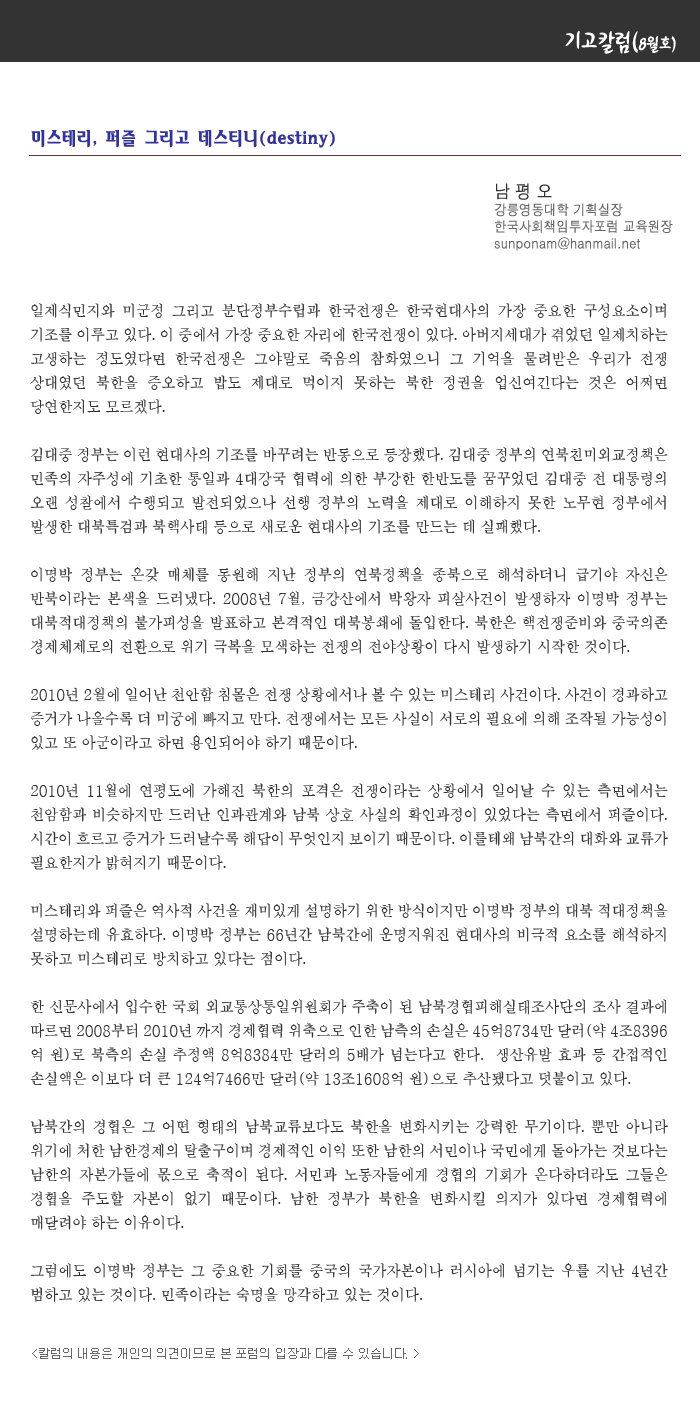
<style>
.page{position:relative;width:700px;height:1401px;background:#ffffff}
.page>*{position:absolute;margin:0}
.t1{font:24px "Seoul-Script";letter-spacing:-0.01em;color:#ffffff;scale:0.9 1}
.t2{font:18px "Seoul-Script";letter-spacing:-0.01em;color:#ffffff;scale:0.9 1}
.t3{font:18px "Seoul-Crysanthemum";letter-spacing:-0.01em;color:#333399;scale:0.9 1}
.t4{font:14px "H2gtrM";letter-spacing:-0.01em;color:#666666;scale:0.9 1}
.t5{font:18px "H2gtrM";letter-spacing:-0.01em;color:#333333;scale:0.9 1}
.t6{font:15px/24px "H2mjsM";letter-spacing:-0.01em;color:#333333;scale:0.95 1}
.t7{font:12px "Gulim";letter-spacing:-0.01em;color:#666666}
</style>
<div class="page">
<p class="t1" style="left:565px;top:30px;width:111px;height:24px">기고칼럼(<span class="t2">8월호)</span></p>
<p class="t3" style="left:31px;top:130px;width:304px;height:18px">미스테리, 퍼즐 그리고 데스티니(destiny)</p>
<p class="t4" style="left:494px;top:183px;width:179px;height:68px"><span class="t5">남 평 오 <br></span>강릉영동대학 기획실장<br>한국사회책임투자포럼 교육원장<br>sunponam@hanmail.net</p>
<p class="t6" style="left:30px;top:303px;width:638px;height:999px;text-align:justify">일제식민지와 미군정 그리고 분단정부수립과 한국전쟁은 한국현대사의 가장 중요한 구성요소이며 기조를 이루고 있다. 이 중에서 가장 중요한 자리에 한국전쟁이 있다. 아버지세대가 겪었던 일제치하는 고생하는 정도였다면 한국전쟁은 그야말로 죽음의 참화였으니 그 기억을 물려받은 우리가 전쟁 상대였던 북한을 증오하고 밥도 제대로 먹이지 못하는 북한 정권을 업신여긴다는 것은 어쩌면 당연한지도 모르겠다.<br><br>김대중 정부는 이런 현대사의 기조를 바꾸려는 반동으로 등장했다. 김대중 정부의 연북친미외교정책은 민족의 자주성에 기초한 통일과 4대강국 협력에 의한 부강한 한반도를 꿈꾸었던 김대중 전 대통령의 오랜 성찰에서 수행되고 발전되었으나 선행 정부의 노력을 제대로 이해하지 못한 노무현 정부에서 발생한 대북특검과 북핵사태 등으로 새로운 현대사의 기조를 만드는 데 실패했다. <br><br>이명박 정부는 온갖 매체를 동원해 지난 정부의 연북정책을 종북으로 해석하더니 급기야 자신은 반북이라는 본색을 드러냈다. 2008년 7월, 금강산에서 박왕자 피살사건이 발생하자 이명박 정부는 대북적대정책의 불가피성을 발표하고 본격적인 대북봉쇄에 돌입한다. 북한은 핵전쟁준비와 중국의존 경제체제로의 전환으로 위기 극복을 모색하는 전쟁의 전야상황이 다시 발생하기 시작한 것이다.<br><br>2010년 2월에 일어난 천안함 침몰은 전쟁 상황에서나 볼 수 있는 미스테리 사건이다. 사건이 경과하고 증거가 나올수록 더 미궁에 빠지고 만다. 전쟁에서는 모든 사실이 서로의 필요에 의해 조작될 가능성이 있고 또 아군이라고 하면 용인되어야 하기 때문이다. <br><br>2010년 11월에 연평도에 가해진 북한의 포격은 전쟁이라는 상황에서 일어날 수 있는 측면에서는 천암함과 비슷하지만 드러난 인과관계와 남북 상호 사실의 확인과정이 있었다는 측면에서 퍼즐이다. 시간이 흐르고 증거가 드러날수록 해답이 무엇인지 보이기 때문이다. 이를테왜 남북간의 대화와 교류가 필요한지가 밝혀지기 때문이다. <br><br>미스테리와 퍼즐은 역사적 사건을 재미있게 설명하기 위한 방식이지만 이명박 정부의 대북 적대정책을 설명하는데 유효하다. 이명박 정부는 66년간 남북간에 운명지워진 현대사의 비극적 요소를 해석하지 못하고 미스테리로 방치하고 있다는 점이다. <br><br>한 신문사에서 입수한 국회 외교통상통일위원회가 주축이 된 남북경협피해실태조사단의 조사 결과에 따르면 2008부터 2010년 까지 경제협력 위축으로 인한 남측의 손실은 45억8734만 달러(약 4조8396억 원)로 북측의 손실 추정액 8억8384만 달러의 5배가 넘는다고 한다.  생산유발 효과 등 간접적인 손실액은 이보다 더 큰 124억7466만 달러(약 13조1608억 원)으로 추산됐다고 덧붙이고 있다.<br><br>남북간의 경협은 그 어떤 형태의 남북교류보다도 북한을 변화시키는 강력한 무기이다. 뿐만 아니라 위기에 처한 남한경제의 탈출구이며 경제적인 이익 또한 남한의 서민이나 국민에게 돌아가는 것보다는 남한의 자본가들에 몫으로 축적이 된다. 서민과 노동자들에게 경협의 기회가 온다하더라도 그들은 경협을 주도할 자본이 없기 때문이다. 남한 정부가 북한을 변화시킬 의지가 있다면 경제협력에 매달려야 하는 이유이다.<br><br>그럼에도 이명박 정부는 그 중요한 기회를 중국의 국가자본이나 러시아에 넘기는 우를 지난 4년간 범하고 있는 것이다. 민족이라는 숙명을 망각하고 있는 것이다.</p>
<p class="t7" style="left:32px;top:1348px;width:387px;height:11px">&lt;칼럼의 내용은 개인의 의견이므로 본 포럼의 입장과 다를 수 있습니다. &gt;</p>
</div>
